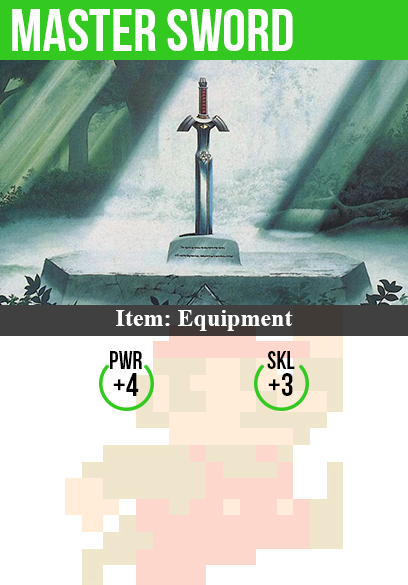
<style>
.page{position:relative;width:408px;height:585px;background:#ffffff}
.page>*{position:absolute;margin:0}
.t1{font:60px "BebasNeue";color:#ffffff}
.t2{font:24px "TimesNewRomanPS-BoldMT";color:#ffffff}
.t3{font:25px "BebasNeue";color:#000000}
.t4{font:32px "BebasNeue";color:#000000}
</style>
<div class="page">
<p class="t1" style="left:12px;top:9px;width:281px;height:42px">master sword</p>
<p class="t2" style="left:116px;top:310px;width:177px;height:21px">Item: Equipment</p>
<p class="t3" style="left:110px;top:351px;width:32px;height:18px">pwr</p>
<p class="t3" style="left:267px;top:351px;width:28px;height:18px">skl</p>
<p class="t4" style="left:113px;top:373px;width:26px;height:23px">+4</p>
<p class="t4" style="left:268px;top:373px;width:25px;height:23px">+3</p>
</div>
